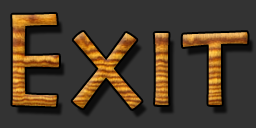
<style>
.page{position:relative;width:256px;height:128px;background:#333333}
.page>*{position:absolute;margin:0}
.t1{font:120.2px "Pericles"}
</style>
<div class="page">
<p class="t1" style="left:12px;top:14px;width:236px;height:95px">Exit</p>
</div>
